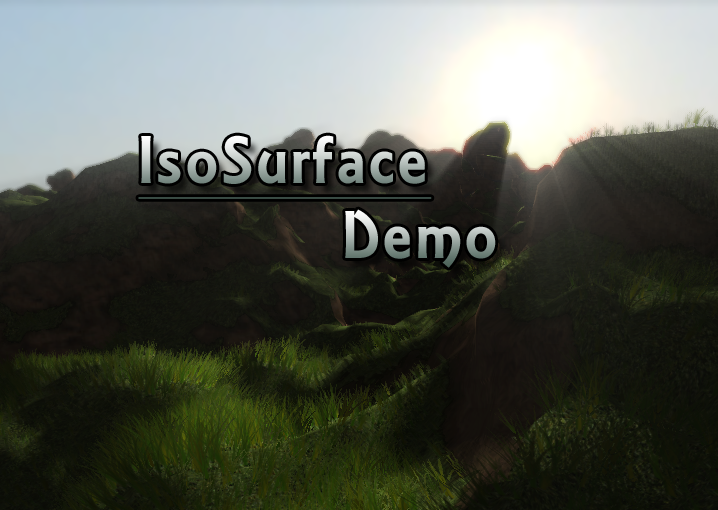
<style>
.page{position:relative;width:718px;height:510px}
.page>*{position:absolute;margin:0}
.t1{font:72px "ARESSENCE";letter-spacing:0.05em;text-decoration:underline}
.t2{font:72px "ARESSENCE";letter-spacing:0.05em}
</style>
<div class="page">
<p class="t1" style="left:138px;top:135px;width:294px;height:64px">IsoSurface</p>
<p class="t2" style="left:345px;top:209px;width:151px;height:59px">Demo</p>
</div>
